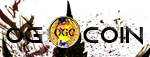
<style>
.page{position:relative;width:150px;height:57px;background:#ffffff}
.page>*{position:absolute;margin:0}
.t1{font:20.3px "TheShapeOfThings";color:#000000;scale:1.1 1}
</style>
<div class="page">
<p class="t1" style="left:6px;top:25px;width:137px;height:20px">OG       Coin</p>
</div>
